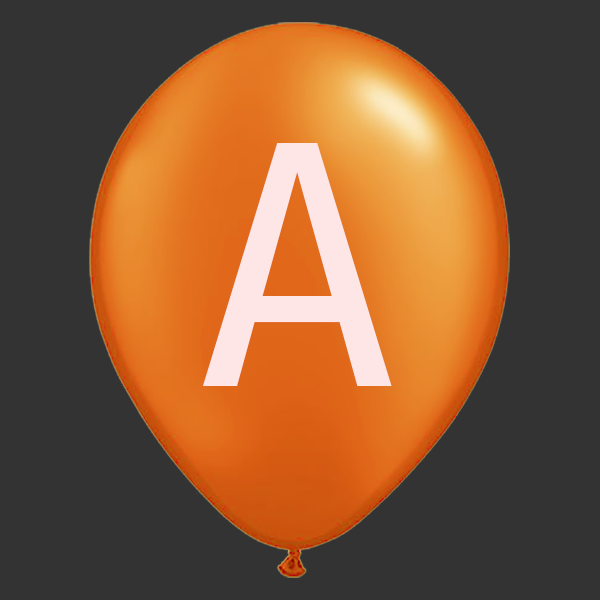
<style>
.page{position:relative;width:600px;height:600px;background:#333333}
.page>*{position:absolute;margin:0}
.t1{font:333.3px "DejaVuSansMono";color:#ffe6e6}
</style>
<div class="page">
<p class="t1" style="left:203px;top:143px;width:189px;height:243px">A</p>
</div>
